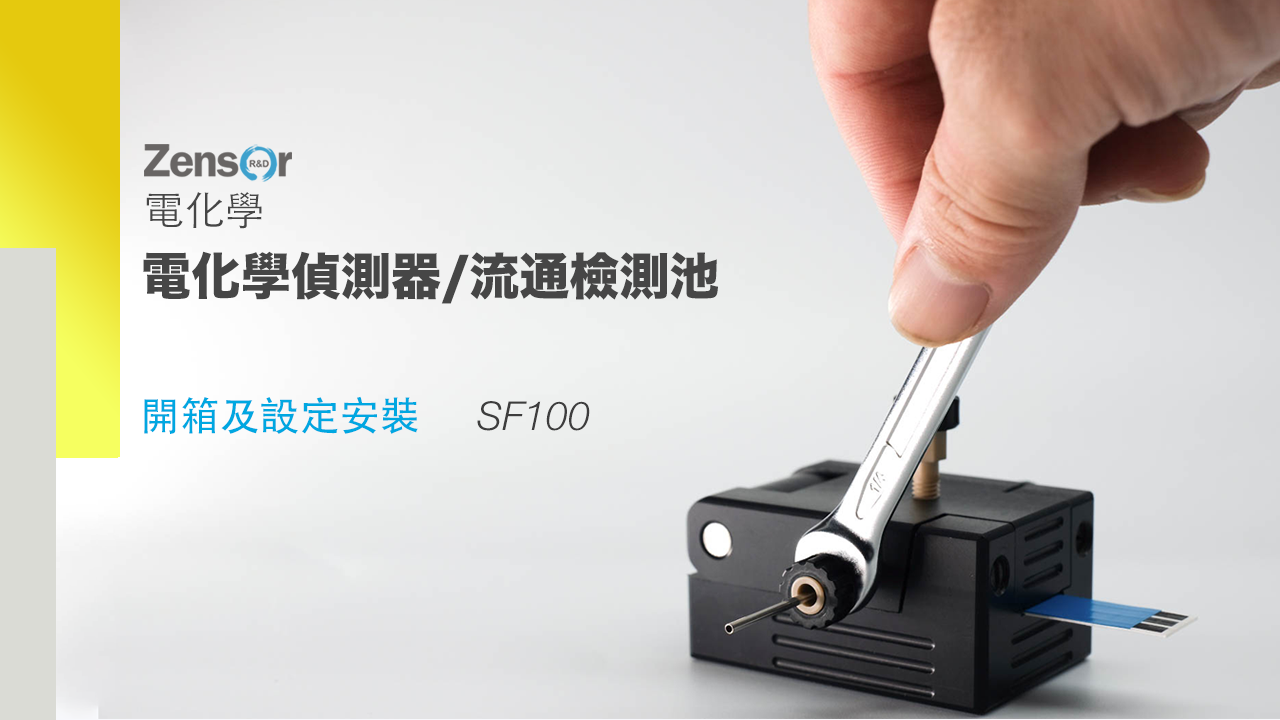
<style>
.page{position:relative;width:1280px;height:720px}
.page>*{position:absolute;margin:0}
.t1{font:40px "STHeitiTC-Light";color:#464646}
.t2{font:50px "HiraKakuStd-W8";color:#464646}
.t3{font:40px "STHeitiTC-Medium";color:#00a7e1}
.t4{font:40px "HelveticaNeueLTPro-LtIt";color:#3d3d3d}
</style>
<div class="page">
<p class="t1" style="left:146px;top:192px;width:116px;height:37px">電化學</p>
<p class="t2" style="left:143px;top:251px;width:575px;height:53px">電化學偵測器/流通檢測池</p>
<p class="t3" style="left:144px;top:396px;width:274px;height:38px">開箱及設定安裝</p>
<p class="t4" style="left:477px;top:401px;width:113px;height:30px">SF100</p>
</div>
